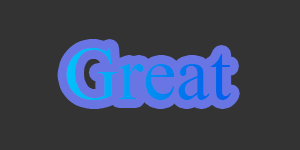
<style>
.page{position:relative;width:300px;height:150px;background:#333333}
.page>*{position:absolute;margin:0}
.t1{font:75px "TimesNewRomanPSMT"}
</style>
<div class="page">
<p class="t1" style="left:66px;top:48px;width:165px;height:52px">Great</p>
</div>
